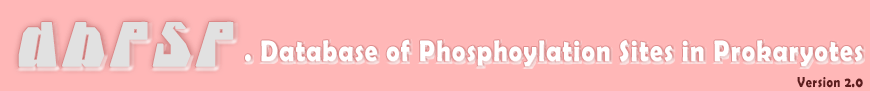
<style>
.page{position:relative;width:870px;height:91px;background:#ffb7b7}
.page>*{position:absolute;margin:0}
.t1{font:60px "IcicleCountry";letter-spacing:0.11em;color:#e1e1e1;font-weight:bold;scale:0.83 1}
.t2{font:30px "BerlinSansFBDemi-Bold";letter-spacing:0.055em;color:#ffffff;scale:0.83 1}
.t3{font:14.4px "BerlinSansFBDemi-Bold";letter-spacing:0.055em;color:#5d1e1e;scale:0.83 1}
</style>
<div class="page">
<p class="t1" style="left:18px;top:21px;width:216px;height:46px">dbPSP</p>
<p class="t2" style="left:245px;top:39px;width:618px;height:27px">. Database of Phosphoylation Sites in Prokaryotes</p>
<p class="t3" style="left:797px;top:77px;width:66px;height:11px">Version 2.0</p>
</div>
